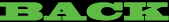
<style>
.page{position:relative;width:169px;height:22px;background:#5fbb46}
.page>*{position:absolute;margin:0}
.t1{font:24px "BlackoakStd";color:#5fbb46}
</style>
<div class="page">
<p class="t1" style="left:0px;top:2px;width:169px;height:19px">BACK</p>
</div>
